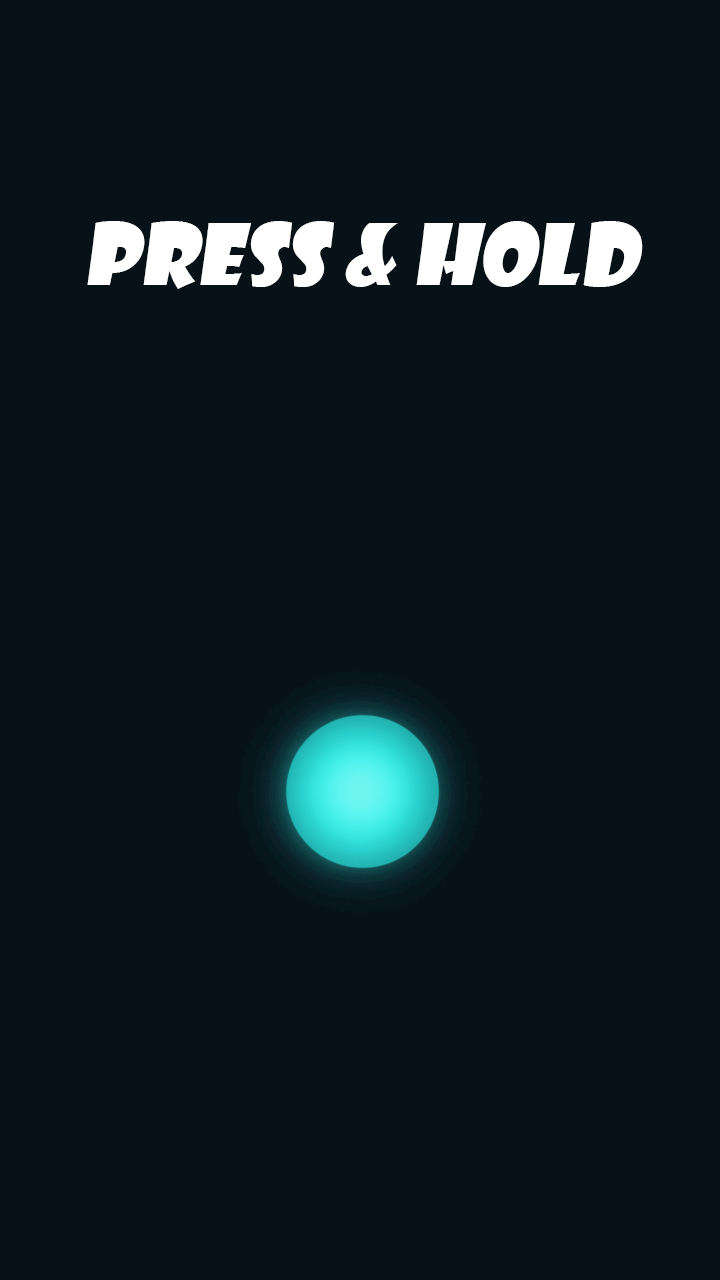
<style>
.page{position:relative;width:720px;height:1280px;background:#071118}
.page>*{position:absolute;margin:0}
.t1{font:83.3px "ShowcardGothic-Reg";color:#ffffff;font-style:italic}
</style>
<div class="page">
<p class="t1" style="left:87px;top:221px;width:556px;height:68px">Press &amp; hold</p>
</div>
